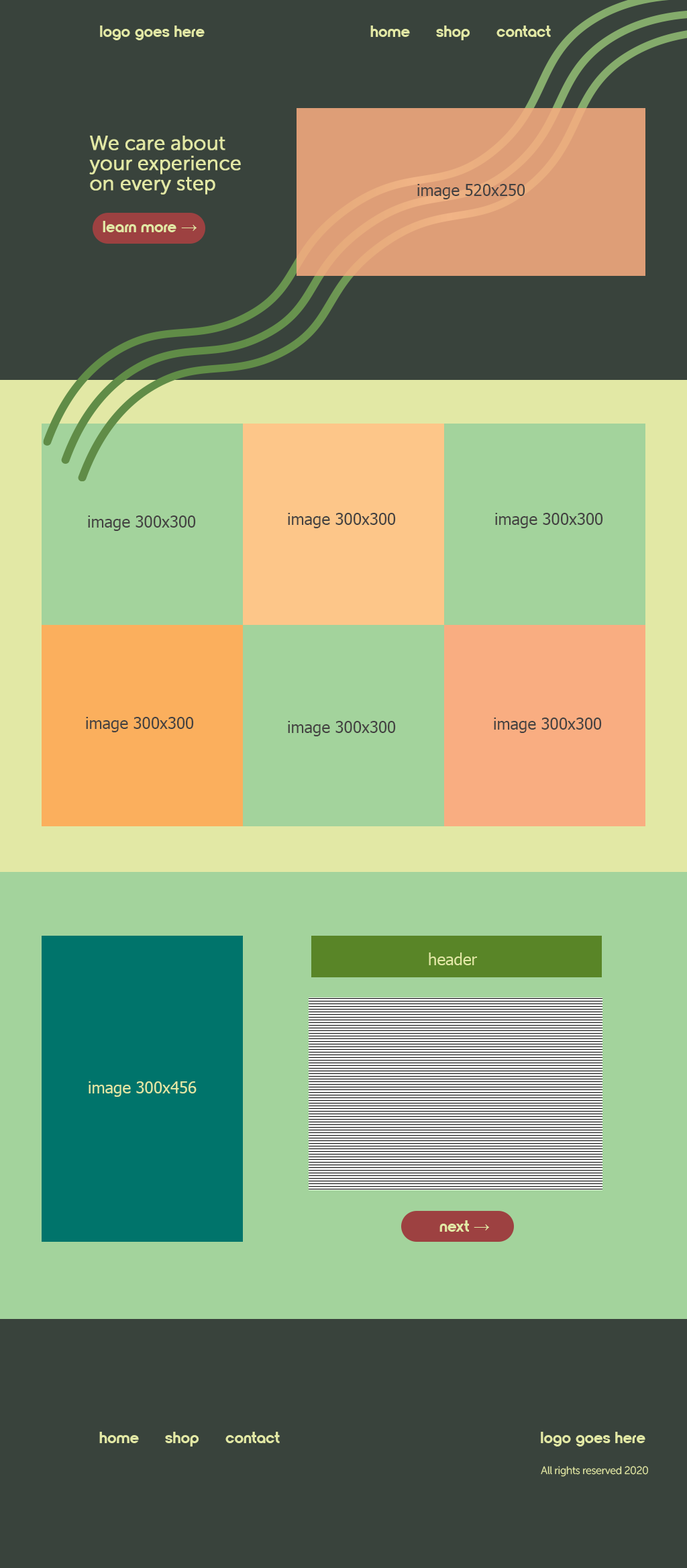
<style>
.page{position:relative;width:687px;height:1568px;background:#39433c}
.page>*{position:absolute;margin:0}
.t1{font:16.1px "NordiquePro-Bold";color:#e2e8a5}
.t2{font:20.1px/20.1px "MuseoSansCyrl-300";letter-spacing:-0.01em;color:#e2e8a5;font-weight:bold}
.t3{font:16.1px "Tahoma";color:#434141}
.t4{font:16.1px "TimesNewRomanPSMT";color:#e2e8a5}
.t5{font:16.1px "Tahoma";color:#e2e8a5}
.t6{font:10.7px "MuseoSansCyrl-300";letter-spacing:-0.025em;color:#e2e8a5}
</style>
<div class="page">
<p class="t1" style="left:100px;top:26px;width:105px;height:14px">logo goes here</p>
<p class="t1" style="left:371px;top:26px;width:39px;height:11px">home</p>
<p class="t1" style="left:436px;top:26px;width:35px;height:14px">shop</p>
<p class="t1" style="left:497px;top:26px;width:54px;height:11px">contact</p>
<p class="t2" style="left:89px;top:136px;width:152px;height:59px">We care about <br>your experience<br>on every step</p>
<p class="t3" style="left:418px;top:184px;width:108px;height:15px">image 520x250</p>
<p class="t1" style="left:103px;top:221px;width:94px;height:11px">learn more <span class="t4">→</span></p>
<p class="t3" style="left:88px;top:516px;width:108px;height:15px">image 300x300</p>
<p class="t3" style="left:288px;top:513px;width:108px;height:15px">image 300x300</p>
<p class="t3" style="left:495px;top:513px;width:108px;height:15px">image 300x300</p>
<p class="t3" style="left:86px;top:717px;width:108px;height:15px">image 300x300</p>
<p class="t3" style="left:288px;top:721px;width:108px;height:15px">image 300x300</p>
<p class="t3" style="left:494px;top:718px;width:108px;height:15px">image 300x300</p>
<p class="t5" style="left:429px;top:952px;width:48px;height:13px">header</p>
<p class="t5" style="left:89px;top:1081px;width:108px;height:16px">image 300x456</p>
<p class="t1" style="left:440px;top:1220px;width:49px;height:12px">next <span class="t4">→</span></p>
<p class="t1" style="left:99px;top:1432px;width:40px;height:11px">home</p>
<p class="t1" style="left:165px;top:1432px;width:34px;height:15px">shop</p>
<p class="t1" style="left:226px;top:1432px;width:54px;height:11px">contact</p>
<p class="t1" style="left:541px;top:1432px;width:105px;height:15px">logo goes here</p>
<p class="t6" style="left:541px;top:1466px;width:107px;height:11px">All rights reserved 2020</p>
</div>
